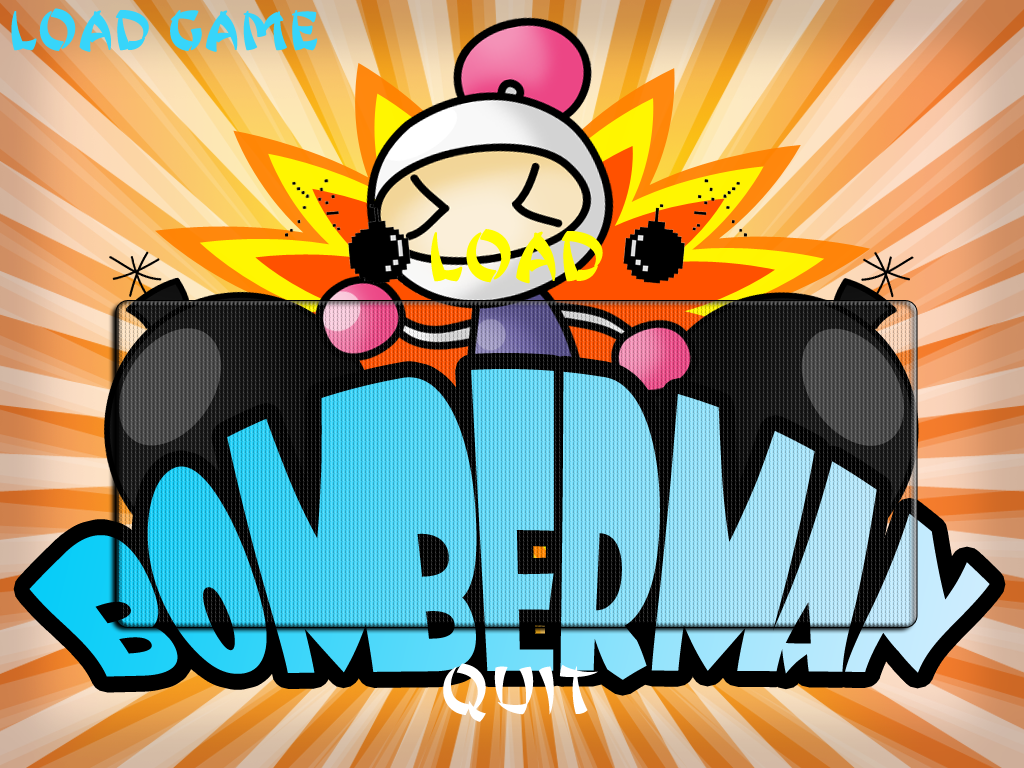
<style>
.page{position:relative;width:1024px;height:768px}
.page>*{position:absolute;margin:0}
.t1{font:48px "JingJing";color:#37d5fa;font-weight:bold}
.t2{font:60px "JingJing";color:#fffc00;font-weight:bold}
.t3{font:60px "JingJing";color:#ffffff}
</style>
<div class="page">
<p class="t1" style="left:11px;top:8px;width:307px;height:44px">LOAD GAME</p>
<p class="t2" style="left:431px;top:229px;width:172px;height:55px">load</p>
<p class="t3" style="left:443px;top:663px;width:155px;height:59px;text-align:center">QUIT<br>u</p>
</div>
